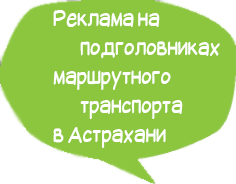
<style>
.page{position:relative;width:236px;height:184px;background:#8cc63f}
.page>*{position:absolute;margin:0}
.t1{font:24px "SuplexmentaryComicNC";color:#ffffff;scale:0.8 1}
</style>
<div class="page">
<p class="t1" style="left:53px;top:10px;width:167px;height:138px">Реклама на <br>       подголовниках <br>маршрутного <br>       транспорта <br>в Астрахани</p>
</div>
